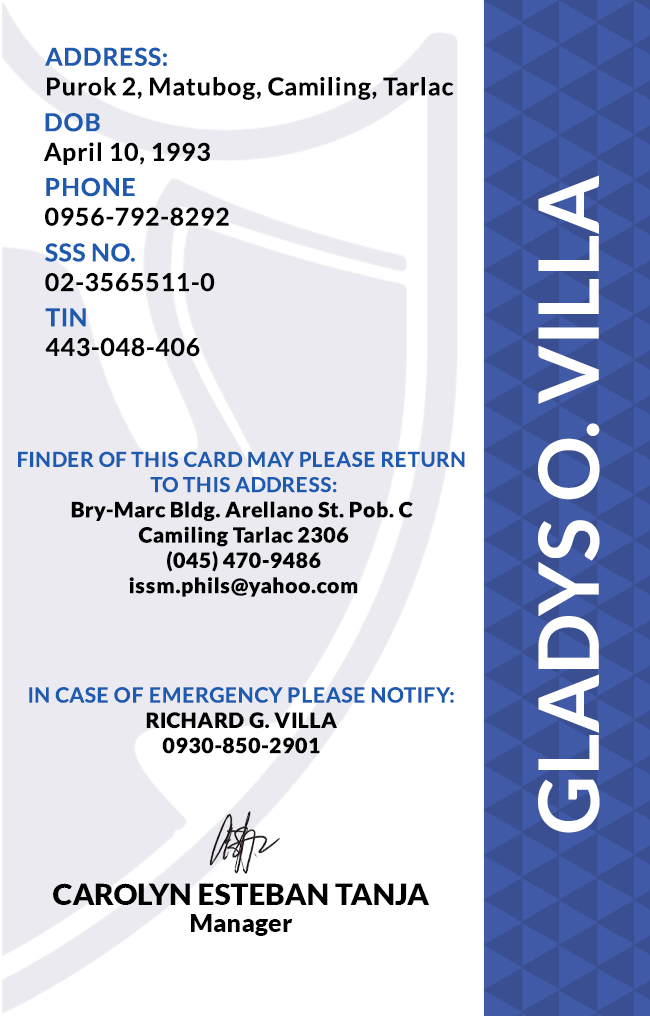
<style>
.page{position:relative;width:650px;height:1016px;background:#ffffff}
.page>*{position:absolute;margin:0}
.t1{font:24.7px/29.6px "Lato-Bold";letter-spacing:0.025em;color:#000000}
.t2{font:24.7px/29.6px "Lato-Bold";letter-spacing:0.025em}
.t3{font:83.3px "Lato-Bold";color:#ffffff}
.t4{font:21.1px "Lato-Black";letter-spacing:0.025em}
.t5{font:20.5px/25.3px "Lato-Bold";letter-spacing:0.025em;text-transform:uppercase}
.t6{font:21.1px/25.3px "Lato-Bold";letter-spacing:0.025em}
.t7{font:29.5px "Lato-Black";color:#000000}
.t8{font:25px "Lato-Black";color:#000000}
</style>
<div class="page">
<p class="t1" style="left:45px;top:47px;width:409px;height:53px">ADDRESS:<br>Purok 2, Matubog, Camiling, Tarlac</p>
<p class="t1" style="left:43px;top:113px;width:167px;height:52px">DOB<br>April 10, 1993</p>
<p class="t2" style="left:45px;top:177px;width:184px;height:49px">PHONE <br>0956-792-8292</p>
<p class="t3" style="left:538px;top:175px;width:62px;height:658px;rotate:-90deg">GLADYS O. VILLA</p>
<p class="t2" style="left:45px;top:243px;width:170px;height:49px">SSS NO.<br>02-3565511-0</p>
<p class="t1" style="left:45px;top:308px;width:155px;height:49px">TIN<br>443-048-406</p>
<p class="t4" style="left:18px;top:451px;width:447px;height:146px;text-align:center"><span class="t5">Finder of this card may please return <br>to this address:<br></span>Bry-Marc Bldg. Arellano St. Pob. C <br>Camiling Tarlac 2306<br>(045) 470-9486<br>issm.phils@yahoo.com</p>
<p class="t6" style="left:29px;top:687px;width:425px;height:67px;text-align:center">IN CASE OF EMERGENCY PLEASE NOTIFY:<br><span class="t4">RICHARD G. VILLA<br>0930-850-2901</span></p>
<p class="t7" style="left:53px;top:883px;width:376px;height:22px">CAROLYN ESTEBAN TANJA</p>
<p class="t8" style="left:191px;top:914px;width:102px;height:22px">Manager</p>
</div>
